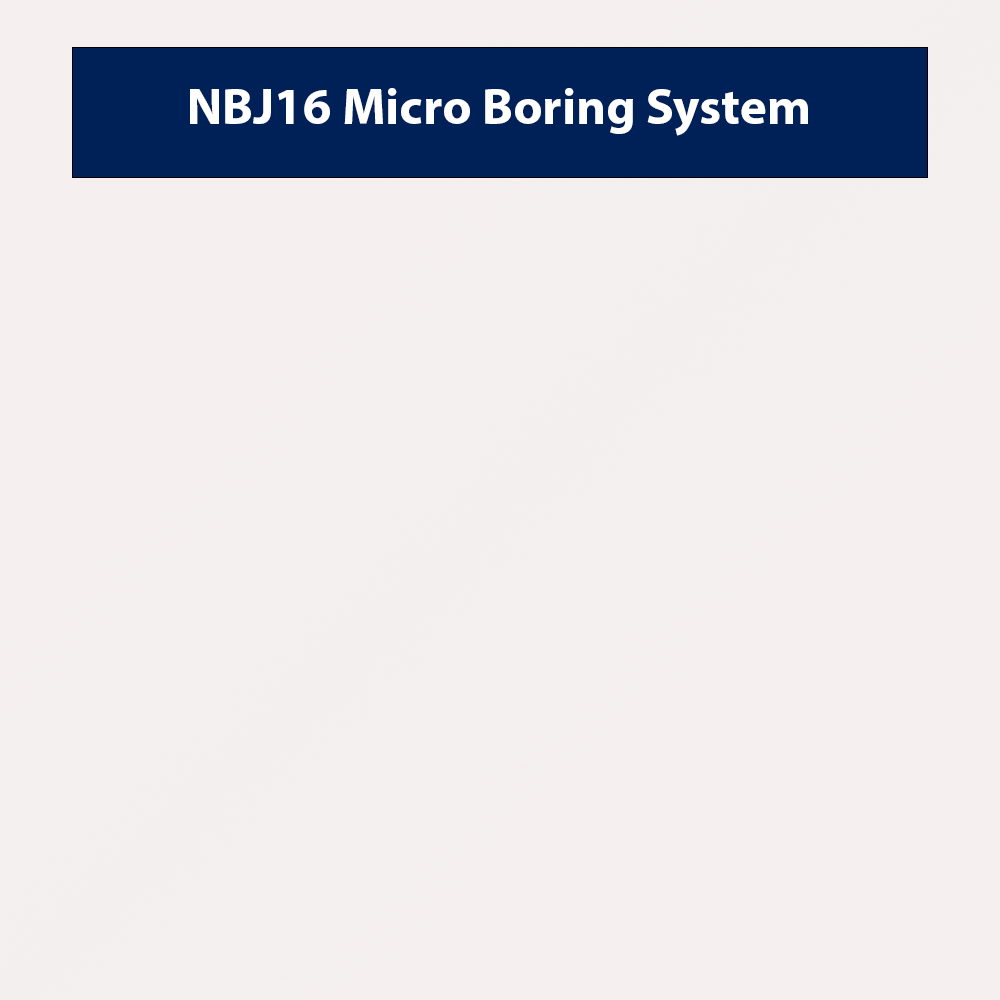
<style>
.page{position:relative;width:1000px;height:1000px;background:#f5efef}
.page>*{position:absolute;margin:0}
.t1{font:51.3px "MyriadPro-Bold";color:#ffffff}
</style>
<div class="page">
<p class="t1" style="left:190px;top:88px;width:618px;height:48px">NBJ16 Micro Boring System</p>
</div>
